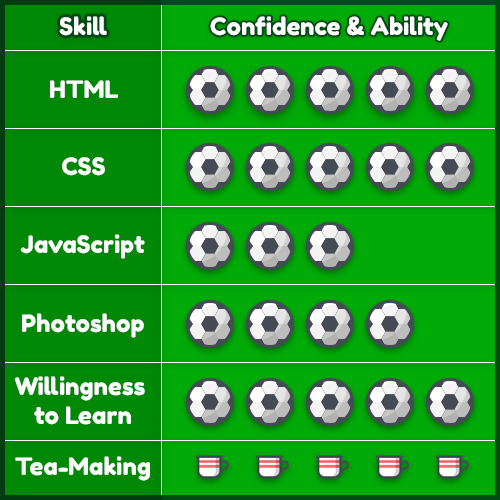
<style>
.page{position:relative;width:500px;height:500px;background:#008806}
.page>*{position:absolute;margin:0}
.t1{font:24px "FredokaOne-Regular";color:#ffffff}
</style>
<div class="page">
<p class="t1" style="left:59px;top:16px;width:48px;height:20px">Skill</p>
<p class="t1" style="left:210px;top:16px;width:238px;height:25px">Confidence &amp; Ability</p>
<p class="t1" style="left:50px;top:80px;width:68px;height:18px">HTML</p>
<p class="t1" style="left:62px;top:157px;width:43px;height:19px">CSS</p>
<p class="t1" style="left:20px;top:234px;width:125px;height:25px">JavaScript</p>
<p class="t1" style="left:22px;top:313px;width:122px;height:25px">Photoshop</p>
<p class="t1" style="left:14px;top:376px;width:131px;height:49px;text-align:center">Willingness <br>to Learn</p>
<p class="t1" style="left:15px;top:456px;width:135px;height:25px">Tea-Making</p>
</div>
